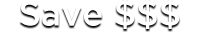
<style>
.page{position:relative;width:200px;height:40px;background:#ffffff}
.page>*{position:absolute;margin:0}
.t1{font:35px "GothamMedium";color:#ffffff}
</style>
<div class="page">
<p class="t1" style="left:20px;top:0px;width:160px;height:29px">Save $$$</p>
</div>
